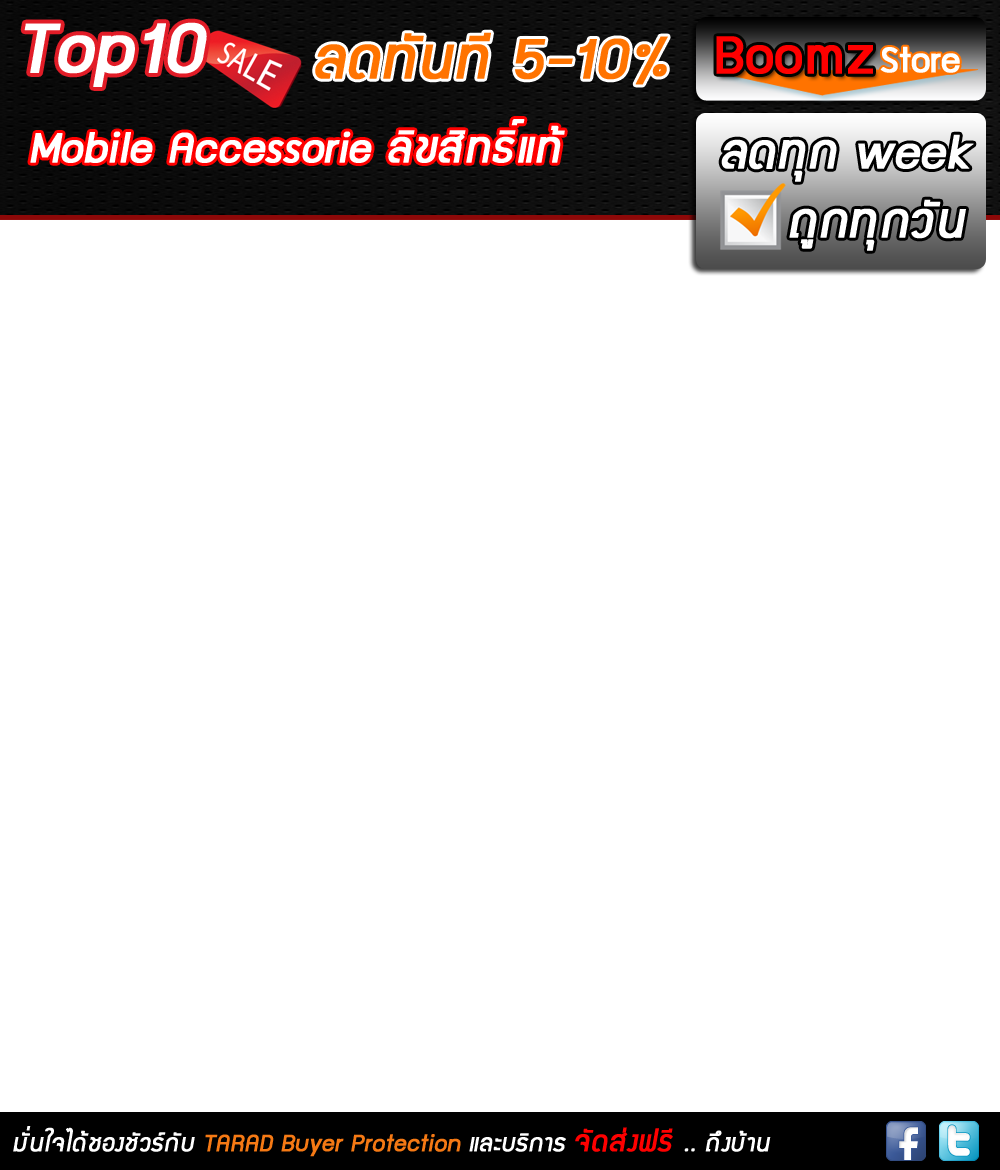
<style>
.page{position:relative;width:1000px;height:1170px;background:#ffffff}
.page>*{position:absolute;margin:0}
.t1{font:80px "supermarket";letter-spacing:0.01em;color:#ffffff;font-weight:bold;font-style:italic}
.t2{font:64px "supermarket";letter-spacing:0.01em;color:#ff7300;font-weight:bold;font-style:italic}
.t3{font:48px "supermarket";letter-spacing:0.01em;color:#ffffff;font-weight:bold;font-style:italic}
.t4{font:53.3px "supermarket";letter-spacing:0.01em;color:#ffffff;font-weight:bold;font-style:italic}
.t5{font:26.7px "supermarket";letter-spacing:0.01em;color:#f57914;font-weight:bold;font-style:italic}
.t6{font:26.7px "supermarket";letter-spacing:0.01em;color:#ffffff;font-weight:bold;font-style:italic}
.t7{font:32px "supermarket";letter-spacing:0.01em;color:#ff0000;font-weight:bold;font-style:italic}
</style>
<div class="page">
<p class="t1" style="left:24px;top:22px;width:183px;height:65px">Top10</p>
<p class="t2" style="left:315px;top:32px;width:353px;height:53px">ลดทันที 5-10%</p>
<p class="t3" style="left:30px;top:119px;width:535px;height:44px">Mobile Accessorie ลิขสิทธิ์แท้</p>
<p class="t4" style="left:721px;top:134px;width:253px;height:48px">ลดทุก week</p>
<p class="t4" style="left:789px;top:199px;width:177px;height:52px">ถูกทุกวัน</p>
<p class="t5" style="left:13px;top:1126px;width:758px;height:31px"><span class="t6">มั่นใจได้ชองชัวร์กับ </span>TARAD Buyer Protection <span class="t6">และบริการ </span><span class="t7">จัดส่งฟรี </span><span class="t6">.. ถึงบ้าน</span></p>
</div>
